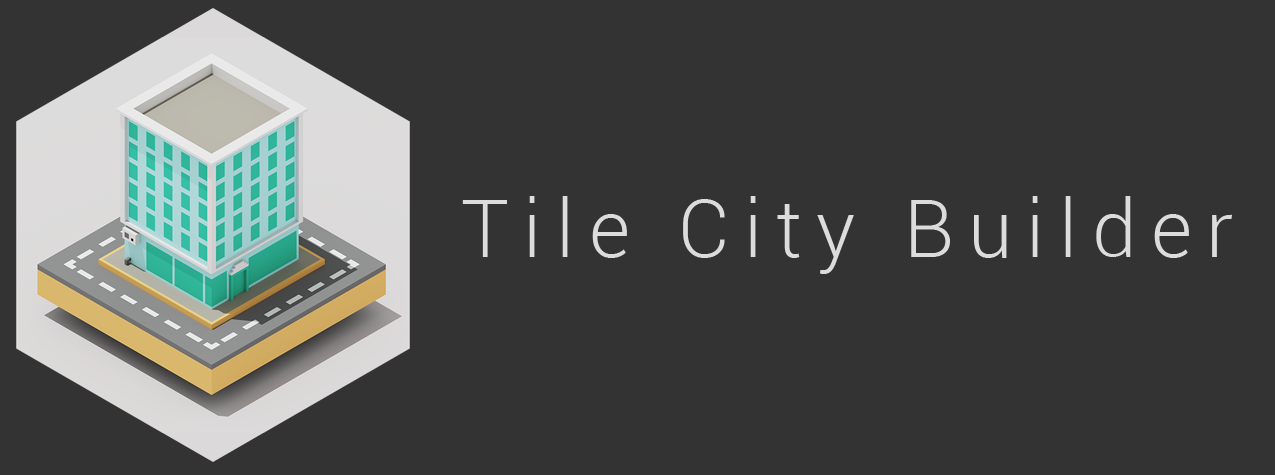
<style>
.page{position:relative;width:1275px;height:475px;background:#333333}
.page>*{position:absolute;margin:0}
.t1{font:80px "Roboto-Light";letter-spacing:0.18em;color:#dddcdc}
</style>
<div class="page">
<p class="t1" style="left:462px;top:196px;width:770px;height:78px">Tile City Builder</p>
</div>
